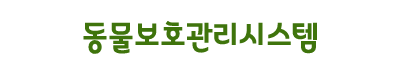
<style>
.page{position:relative;width:402px;height:75px;background:#ffffff}
.page>*{position:absolute;margin:0}
.t1{font:33.6px "ThecircleB";color:#3f740c}
</style>
<div class="page">
<p class="t1" style="left:83px;top:21px;width:234px;height:33px">동물보호관리시스템</p>
</div>
